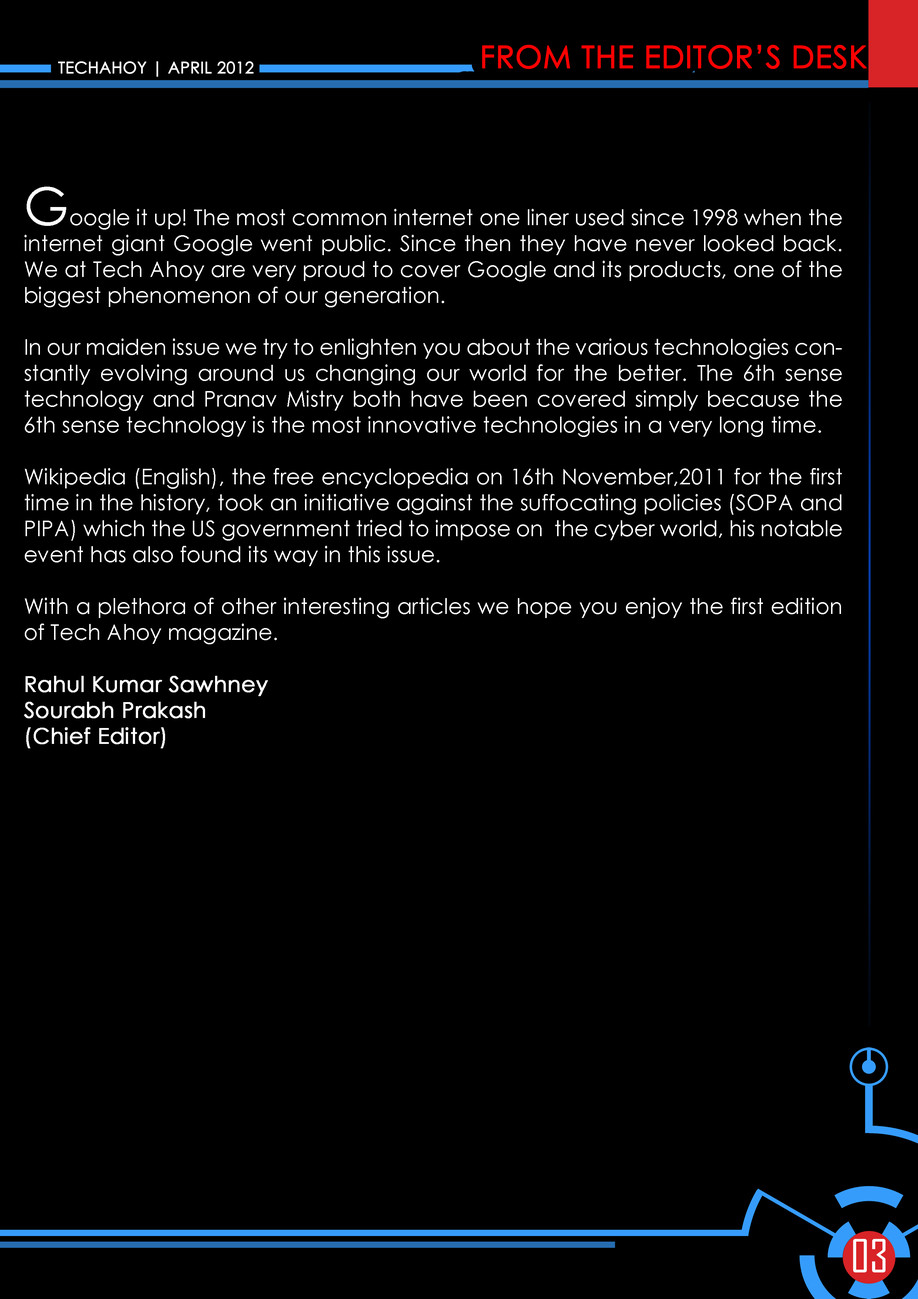
<style>
.page{position:relative;width:918px;height:1299px;background:#000000}
.page>*{position:absolute;margin:0}
.t1{font:30.9px "CenturyGothic";color:#ff0000;text-transform:uppercase;font-weight:bold}
.t2{font:16px "CenturyGothic";color:#ffffff;text-transform:uppercase;font-weight:bold}
.t3{font:21.6px "CenturyGothic";color:#ffffff}
.t4{font:52.4px "CenturyGothic";color:#ffffff}
.t5{font:21.6px "CenturyGothic";color:#ffffff;font-weight:bold}
.t6{font:43.7px "AgencyFB-Reg";color:#ffffff;text-transform:uppercase}
</style>
<div class="page">
<p class="t1" style="left:482px;top:45px;width:385px;height:24px">FROM THE EDITOR’S DESK</p>
<p class="t2" style="left:58px;top:61px;width:196px;height:16px">techahoy | APRIL 2012</p>
<p class="t3" style="left:24px;top:187px;width:818px;height:561px;text-align:justify"><span class="t4">G</span>oogle it up! The most common internet one liner used since 1998 when the internet giant Google went public. Since then they have never looked back. We at Tech Ahoy are very proud to cover Google and its products, one of the biggest phenomenon of our generation.<br><br>In our maiden issue we try to enlighten you about the various technologies constantly evolving around us changing our world for the better. The 6th sense technology and Pranav Mistry both have been covered simply because the 6th sense technology is the most innovative technologies in a very long time. <br><br>Wikipedia (English), the free encyclopedia on 16th November,2011 for the first time in the history, took an initiative against the suffocating policies (SOPA and PIPA) which the US government tried to impose on  the cyber world, his notable event has also found its way in this issue.<br><br>With a plethora of other interesting articles we hope you enjoy the first edition of Tech Ahoy magazine.<br><br><span class="t5">Rahul Kumar Sawhney<br>Sourabh Prakash<br>(Chief Editor)</span></p>
<p class="t6" style="left:853px;top:1238px;width:33px;height:34px">03</p>
</div>
